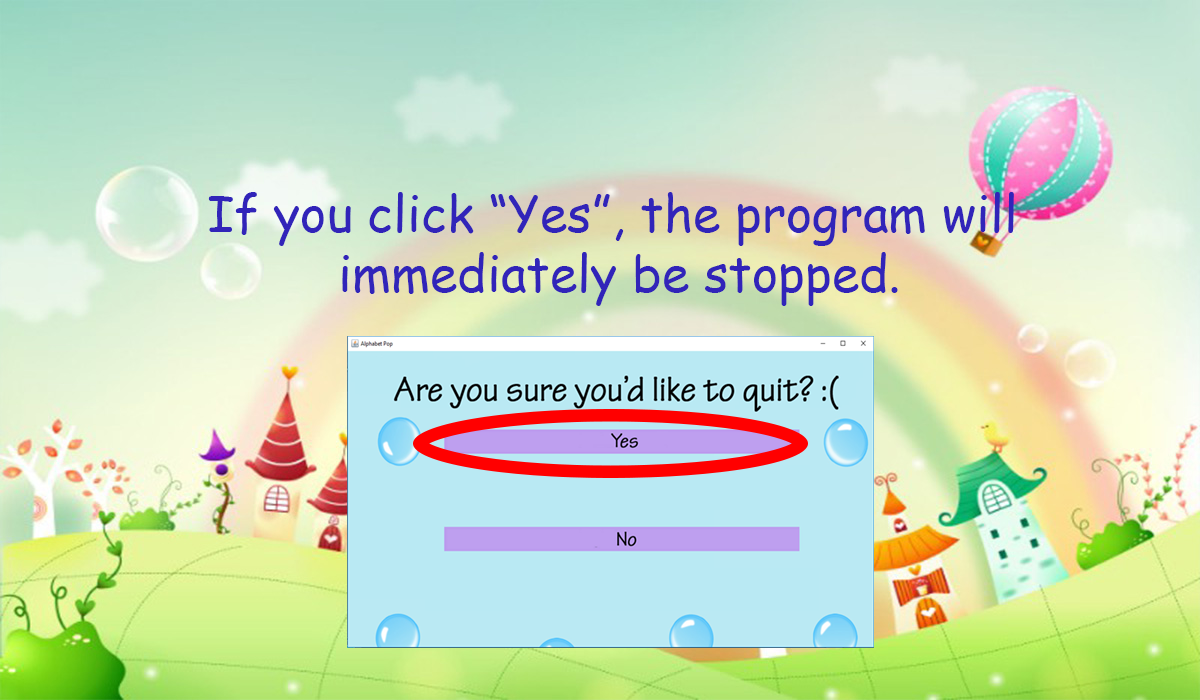
<style>
.page{position:relative;width:1200px;height:700px}
.page>*{position:absolute;margin:0}
.t1{font:12px "ComicSansMS";color:#3124b9}
</style>
<div class="page">
<p class="t1" style="left:208px;top:192px;width:806px;height:114px;text-align:center">If you click “Yes”, the program will <br>immediately be stopped.</p>
</div>
